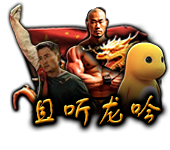
<style>
.page{position:relative;width:170px;height:150px;background:#ffffff}
.page>*{position:absolute;margin:0}
.t1{font:34.1px "FZSTK--GBK1-0"}
</style>
<div class="page">
<p class="t1" style="left:35px;top:95px;width:126px;height:31px">且听龙吟</p>
</div>
